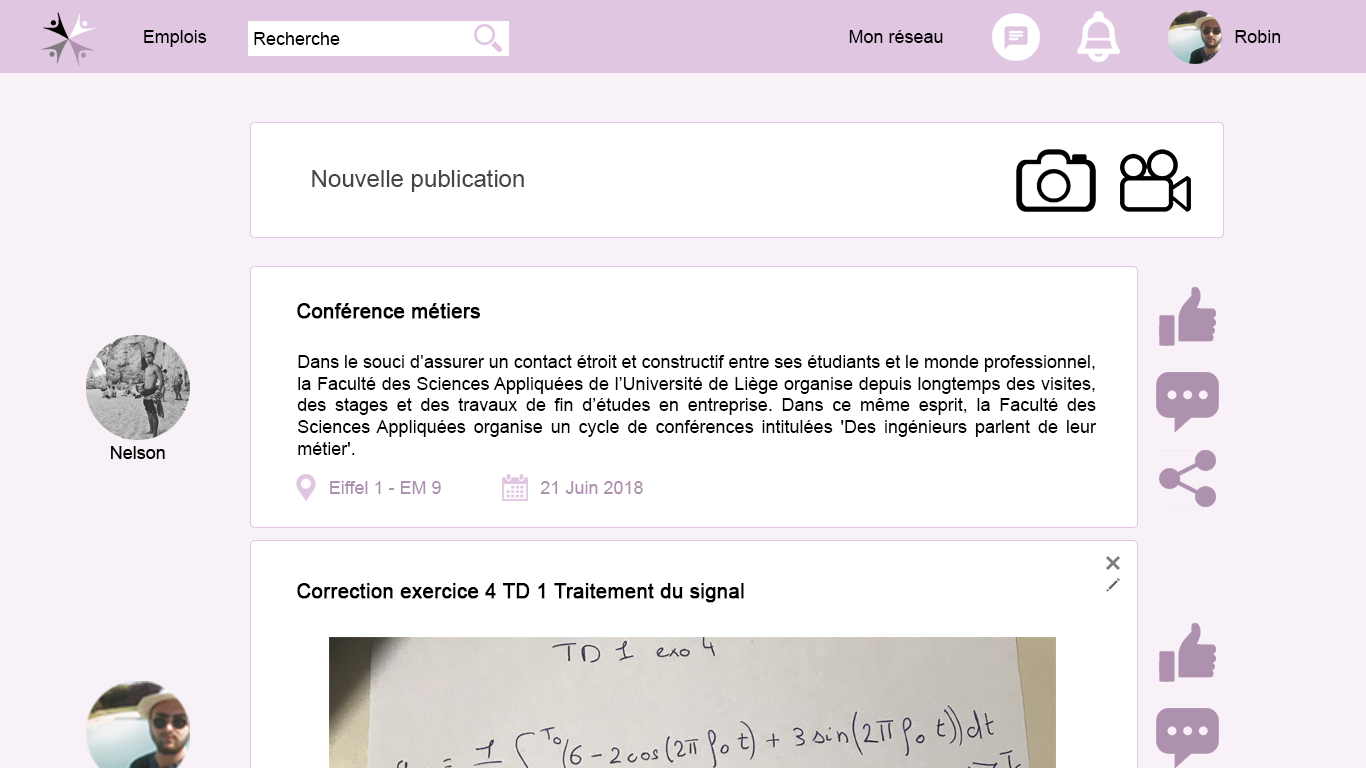
<style>
.page{position:relative;width:1366px;height:768px;background:#ffffff}
.page>*{position:absolute;margin:0}
.t1{font:18px "ArialMT";color:#000000}
.t2{font:24px "ArialMT";color:#454545}
.t3{font:20px "ArialMT";color:#000000;font-weight:bold}
.t4{font:18px "ArialMT";color:#ad90af}
</style>
<div class="page">
<p class="t1" style="left:144px;top:30px;width:63px;height:17px">Emplois</p>
<p class="t1" style="left:849px;top:30px;width:94px;height:13px">Mon réseau</p>
<p class="t1" style="left:1235px;top:30px;width:46px;height:13px">Robin</p>
<p class="t1" style="left:254px;top:32px;width:86px;height:13px">Recherche</p>
<p class="t2" style="left:312px;top:169px;width:212px;height:23px">Nouvelle publication</p>
<p class="t3" style="left:297px;top:303px;width:184px;height:16px">Conférence métiers</p>
<p class="t1" style="left:297px;top:355px;width:800px;height:100px;text-align:justify">Dans le souci d’assurer un contact étroit et constructif entre ses étudiants et le monde professionnel, la Faculté des Sciences Appliquées de l’Université de Liège organise depuis longtemps des visites, des stages et des travaux de fin d’études en entreprise. Dans ce même esprit, la Faculté des Sciences Appliquées organise un cycle de conférences intitulées 'Des ingénieurs parlent de leur métier'.<br><br> <br><br>Au travers de témoignages d'ingénieurs, les conférences brossent le tableau de la place des ingénieurs dans les entreprises, de la diversité actuelle des parcours professionnels d’ingénieurs civils et des apports des ingénieurs dans la société.</p>
<p class="t4" style="left:330px;top:481px;width:111px;height:13px">Eiffel 1 - EM 9</p>
<p class="t4" style="left:540px;top:481px;width:103px;height:13px">21 Juin 2018</p>
<p class="t3" style="left:297px;top:583px;width:447px;height:20px">Correction exercice 4 TD 1 Traitement du signal</p>
</div>
